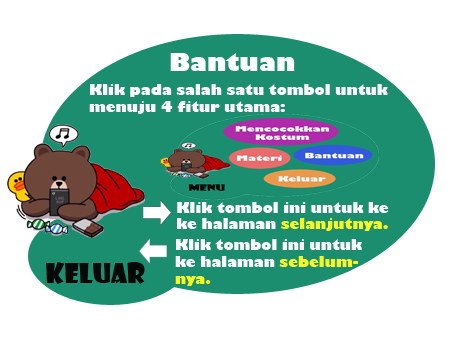
<style>
.page{position:relative;width:454px;height:340px;background:#ffffff}
.page>*{position:absolute;margin:0}
.t1{font:24px "GillSans-UltraBold";color:#ffffff}
.t2{font:14px "GillSans-UltraBold";color:#fcfbfd}
.t3{font:14px "GillSans-UltraBold";color:#fdfcff}
.t4{font:14px "GillSans-UltraBold";color:#f6f827}
.t5{font:26px "ShowcardGothic-Reg";color:#080808}
</style>
<div class="page">
<p class="t1" style="left:170px;top:53px;width:125px;height:18px">Bantuan</p>
<p class="t2" style="left:89px;top:84px;width:299px;height:30px">Klik pada salah satu tombol untuk <br>menuju 4 fitur utama:</p>
<p class="t3" style="left:177px;top:202px;width:211px;height:29px">Klik tombol ini untuk ke<br>ke halaman <span class="t4">selanjutnya.</span></p>
<p class="t3" style="left:175px;top:239px;width:187px;height:47px">Klik tombol ini untuk<br>ke halaman <span class="t4">sebelum-<br>nya.</span></p>
<p class="t5" style="left:46px;top:262px;width:99px;height:22px">keluar</p>
</div>
